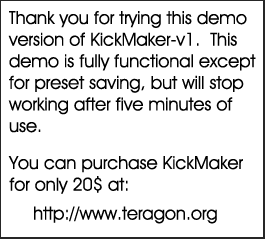
<style>
.page{position:relative;width:265px;height:239px;background:#ffffff}
.page>*{position:absolute;margin:0}
.t1{font:18px "AvantGardeITCbyBT-Book";color:#000000}
</style>
<div class="page">
<p class="t1" style="left:8px;top:11px;width:248px;height:122px">Thank you for trying this demo<br>version of KickMaker-v1.  This<br>demo is fully functional except<br>for preset saving, but will stop<br>working after five minutes of<br>use.</p>
<p class="t1" style="left:8px;top:156px;width:235px;height:38px">You can purchase KickMaker<br>for only 20$ at:</p>
<p class="t1" style="left:34px;top:206px;width:183px;height:18px">http://www.teragon.org</p>
</div>
